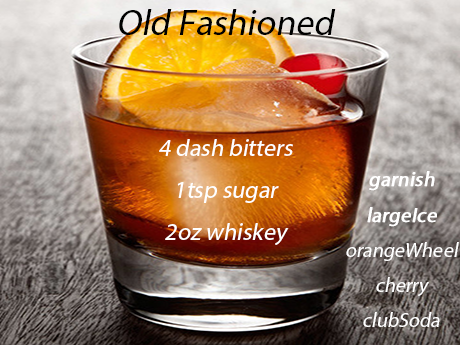
<style>
.page{position:relative;width:460px;height:345px}
.page>*{position:absolute;margin:0}
.t1{font:36px "MyriadPro-Regular";color:#000000;font-style:italic}
.t2{font:24px "MyriadPro-Regular";color:#ffffff;font-style:italic}
.t3{font:20px "MyriadPro-Regular";color:#ffffff;font-style:italic}
.t4{font:20px "MyriadPro-Regular";color:#ffffff;font-weight:bold;font-style:italic}
</style>
<div class="page">
<p class="t1" style="left:119px;top:9px;width:217px;height:26px">Old Fashioned</p>
<p class="t2" style="left:159px;top:139px;width:134px;height:106px;text-align:center">4 dash bitters<br>1tsp sugar<br>2oz whiskey</p>
<p class="t3" style="left:346px;top:171px;width:113px;height:156px;text-align:center"><span class="t4">garnish<br>largeIce<br></span>orangeWheel<br>cherry<br>clubSoda</p>
</div>
